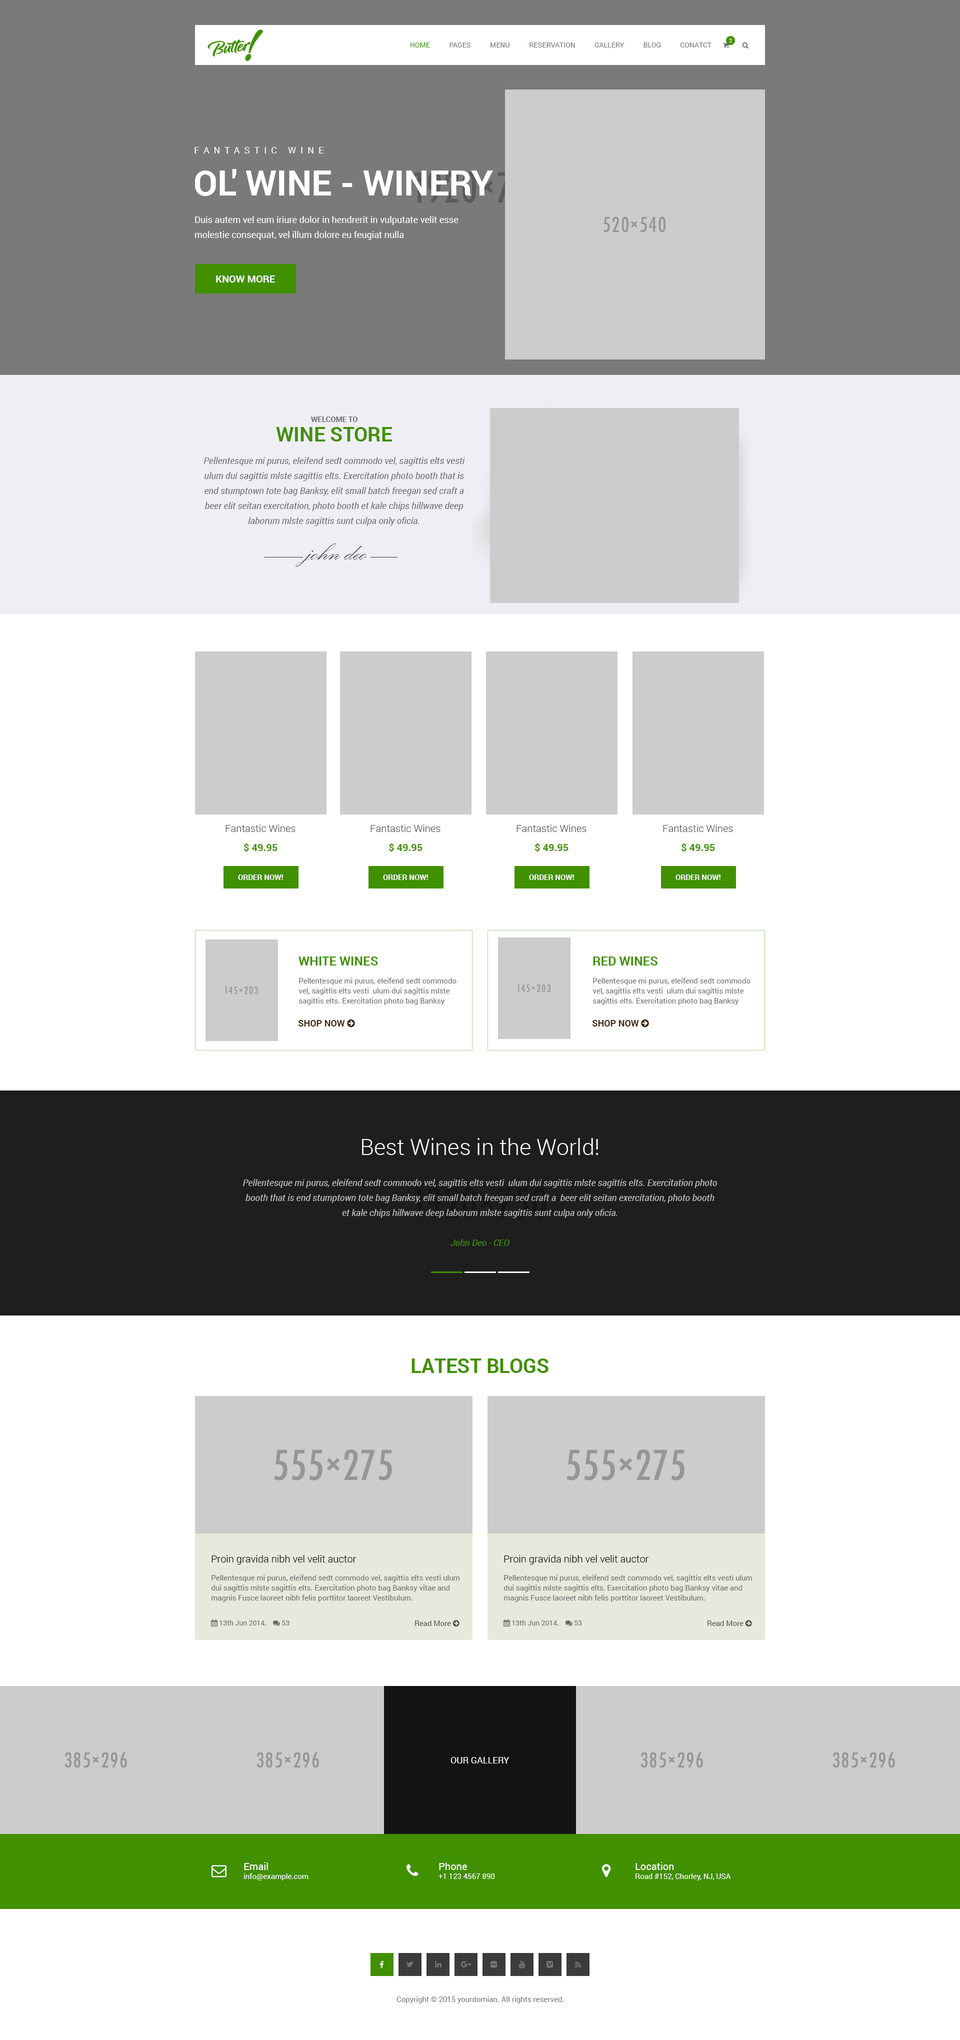
<style>
.page{position:relative;width:960px;height:2040px;background:#ffffff}
.page>*{position:absolute;margin:0}
.t1{font:5.5px "Lato-Regular";color:#ffffff;text-transform:uppercase}
.t2{font:9px "Roboto-Regular";letter-spacing:0.5em;color:#ffffff;text-transform:uppercase}
.t3{font:35px "Roboto-Bold";color:#ffffff;text-transform:uppercase}
.t4{font:9px/15px "Roboto-Regular";color:#ffffff}
.t5{font:10px "Roboto-Bold";color:#ffffff;text-transform:uppercase}
.t6{font:7.5px "Roboto-Bold";color:#6c6c6c;text-transform:uppercase}
.t7{font:20px "Roboto-Bold";color:#409000;text-transform:uppercase}
.t8{font:9px/15px "Roboto-Italic";color:#6d6d6d}
.t9{font:30px "KunstlerScript";color:#363535}
.t10{font:10px "Roboto-Light";color:#4e4f4e}
.t11{font:10px "Roboto-Bold";color:#409000}
.t12{font:7.5px "Roboto-Bold";color:#ffffff;text-transform:uppercase}
.t13{font:12.5px "Roboto-Bold";color:#409000;text-transform:uppercase}
.t14{font:7.5px/10px "Roboto-Regular";color:#6d6d6d}
.t15{font:22.5px "Roboto-Light";color:#ffffff}
.t16{font:9px/15px "Roboto-Italic";color:#c3c3c3}
.t17{font:9px "Roboto-Italic";color:#409000}
.t18{font:10px "Roboto-Light";color:#000000}
.t19{font:9px "Roboto-Regular";color:#ffffff;text-transform:uppercase}
.t20{font:7.5px "Roboto-Regular";color:#ffffff}
.t21{font:10px "Roboto-Regular";color:#ffffff}
.t22{font:7.5px "Roboto-Regular";color:#767676}
</style>
<div class="page">
<p class="t1" style="left:729px;top:38px;width:3px;height:4px">2</p>
<p class="t2" style="left:194px;top:147px;width:130px;height:7px">Fantastic Wine</p>
<p class="t3" style="left:195px;top:169px;width:298px;height:27px">Ol' Wine - Winery</p>
<p class="t4" style="left:195px;top:216px;width:263px;height:24px">Duis autem vel eum iriure dolor in hendrerit in vulputate velit esse<br>molestie consequat, vel illum dolore eu feugiat nulla</p>
<p class="t5" style="left:216px;top:276px;width:59px;height:6px">Know more</p>
<p class="t6" style="left:311px;top:416px;width:47px;height:6px">Welcome to</p>
<p class="t7" style="left:276px;top:427px;width:116px;height:15px">Wine Store</p>
<p class="t8" style="left:204px;top:457px;width:261px;height:69px;text-align:center">Pellentesque mi purus, eleifend sedt commodo vel, sagittis elts vesti  ulum dui sagittis mlste sagittis elts. Exercitation photo booth that is end stumptown tote bag Banksy, elit small batch freegan sed craft a  beer elit seitan exercitation, photo booth et kale chips hillwave deep laborum mlste sagittis sunt culpa only oficia.</p>
<p class="t9" style="left:296px;top:544px;width:70px;height:22px">john deo</p>
<p class="t10" style="left:226px;top:824px;width:70px;height:8px">Fantastic Wines</p>
<p class="t10" style="left:370px;top:824px;width:70px;height:8px">Fantastic Wines</p>
<p class="t10" style="left:516px;top:824px;width:70px;height:8px">Fantastic Wines</p>
<p class="t10" style="left:663px;top:824px;width:70px;height:8px">Fantastic Wines</p>
<p class="t11" style="left:244px;top:843px;width:34px;height:9px">$ 49.95</p>
<p class="t11" style="left:388px;top:843px;width:34px;height:9px">$ 49.95</p>
<p class="t11" style="left:534px;top:843px;width:34px;height:9px">$ 49.95</p>
<p class="t11" style="left:681px;top:843px;width:34px;height:9px">$ 49.95</p>
<p class="t12" style="left:238px;top:874px;width:45px;height:6px">Order now!</p>
<p class="t12" style="left:383px;top:874px;width:45px;height:6px">Order now!</p>
<p class="t12" style="left:529px;top:874px;width:45px;height:6px">Order now!</p>
<p class="t12" style="left:676px;top:874px;width:44px;height:6px">Order now!</p>
<p class="t13" style="left:298px;top:956px;width:80px;height:10px">White Wines</p>
<p class="t13" style="left:593px;top:956px;width:65px;height:10px">Red Wines</p>
<p class="t14" style="left:298px;top:978px;width:158px;height:27px">Pellentesque mi purus, eleifend sedt commodo vel, sagittis elts vesti  ulum dui sagittis mlste sagittis elts. Exercitation photo bag Banksy</p>
<p class="t14" style="left:592px;top:978px;width:158px;height:27px">Pellentesque mi purus, eleifend sedt commodo vel, sagittis elts vesti  ulum dui sagittis mlste sagittis elts. Exercitation photo bag Banksy</p>
<p class="t15" style="left:362px;top:1138px;width:236px;height:17px">Best Wines in the World!</p>
<p class="t16" style="left:243px;top:1179px;width:474px;height:39px;text-align:center">Pellentesque mi purus, eleifend sedt commodo vel, sagittis elts vesti  ulum dui sagittis mlste sagittis elts. Exercitation photo booth that is end stumptown tote bag Banksy, elit small batch freegan sed craft a  beer elit seitan exercitation, photo booth et kale chips hillwave deep laborum mlste sagittis sunt culpa only oficia.</p>
<p class="t17" style="left:450px;top:1239px;width:60px;height:7px">John Deo - CEO</p>
<p class="t7" style="left:412px;top:1358px;width:136px;height:15px">Latest Blogs</p>
<p class="t18" style="left:212px;top:1555px;width:144px;height:9px">Proin gravida nibh vel velit auctor</p>
<p class="t18" style="left:504px;top:1555px;width:145px;height:9px">Proin gravida nibh vel velit auctor</p>
<p class="t14" style="left:211px;top:1574px;width:249px;height:28px">Pellentesque mi purus, eleifend sedt commodo vel, sagittis elts vesti ulum dui sagittis mlste sagittis elts. Exercitation photo bag Banksy vitae and magnis Fusce laoreet nibh felis porttitor laoreet Vestibulum.</p>
<p class="t14" style="left:504px;top:1574px;width:248px;height:28px">Pellentesque mi purus, eleifend sedt commodo vel, sagittis elts vesti ulum dui sagittis mlste sagittis elts. Exercitation photo bag Banksy vitae and magnis Fusce laoreet nibh felis porttitor laoreet Vestibulum.</p>
<p class="t19" style="left:450px;top:1757px;width:60px;height:7px">Our Gallery</p>
<p class="t20" style="left:244px;top:1862px;width:64px;height:18px"><span class="t21">Email<br></span>info@example.com</p>
<p class="t20" style="left:438px;top:1862px;width:56px;height:17px"><span class="t21">Phone<br></span>+1 123 4567 890</p>
<p class="t20" style="left:636px;top:1862px;width:95px;height:18px"><span class="t21">Location<br></span>Road #152, Chorley, NJ, USA</p>
<p class="t22" style="left:396px;top:1996px;width:168px;height:8px">Copyright © 2015 yourdomian. All rights reserved.</p>
</div>
